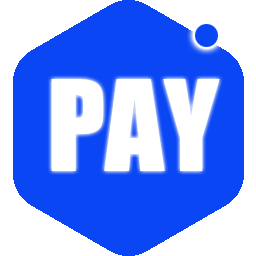
<style>
.page{position:relative;width:256px;height:256px;background:#0a46f3}
.page>*{position:absolute;margin:0}
.t1{font:116px "Impact";color:#ffffff}
</style>
<div class="page">
<p class="t1" style="left:51px;top:79px;width:169px;height:92px">PAY</p>
</div>
